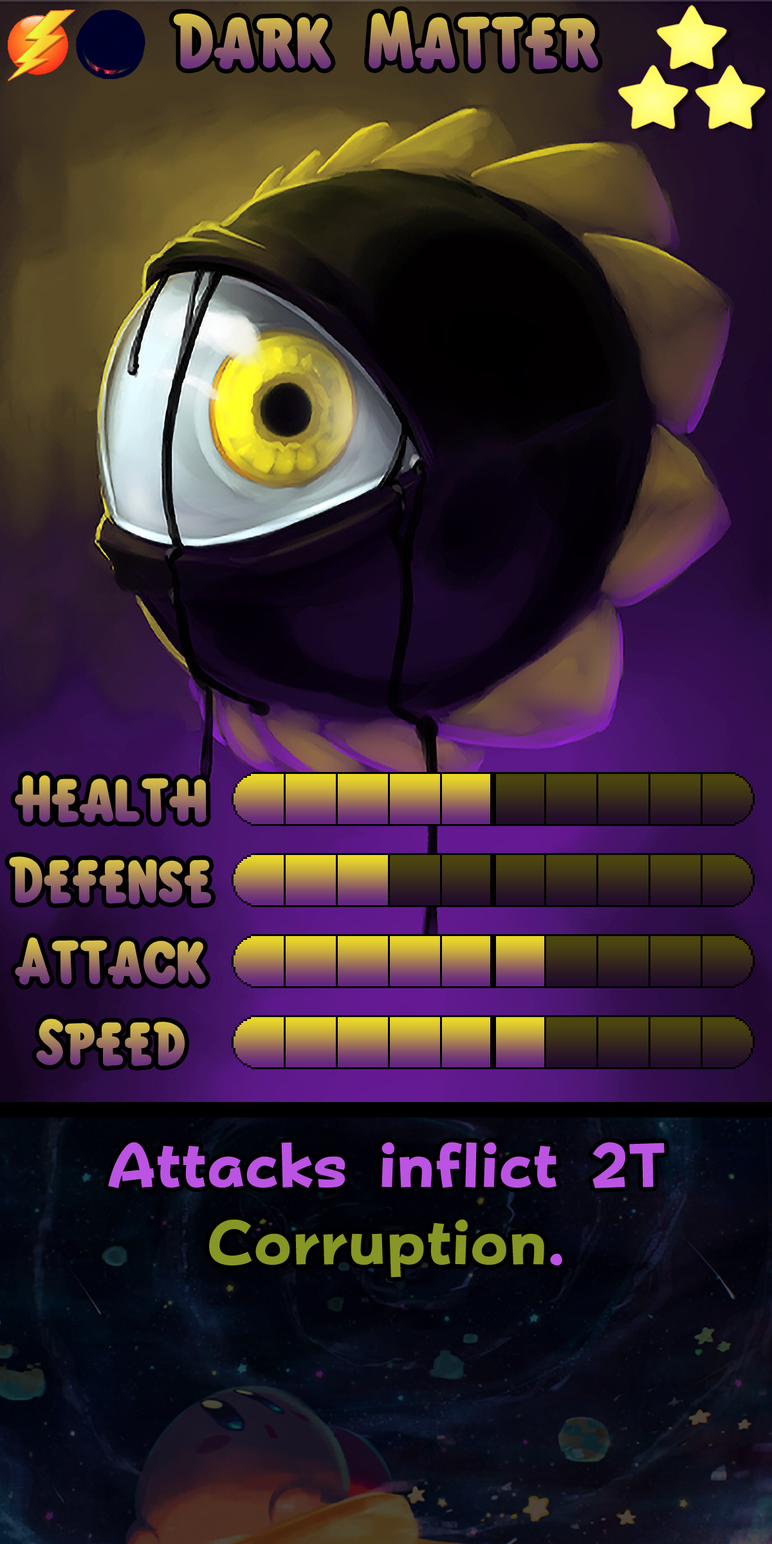
<style>
.page{position:relative;width:772px;height:1544px}
.page>*{position:absolute;margin:0}
.t1{font:119.7px "KirbyClassic"}
.t2{font:100.4px "KirbyClassic"}
.t3{font:106.8px "FOTPopHappinessStrp-ExtraBold";color:#bb54e2}
.t4{font:106.8px "FOTPopHappinessStrp-ExtraBold";color:#879624}
</style>
<div class="page">
<p class="t1" style="left:173px;top:10px;width:425px;height:59px">Dark Matter</p>
<p class="t2" style="left:15px;top:775px;width:192px;height:48px">Health</p>
<p class="t2" style="left:9px;top:856px;width:203px;height:49px">Defense</p>
<p class="t2" style="left:15px;top:938px;width:191px;height:47px">Attack</p>
<p class="t2" style="left:36px;top:1019px;width:149px;height:47px">Speed</p>
<p class="t3" style="left:108px;top:1142px;width:557px;height:136px">Attacks inflict 2T <span class="t4">Corruption</span>.</p>
</div>
